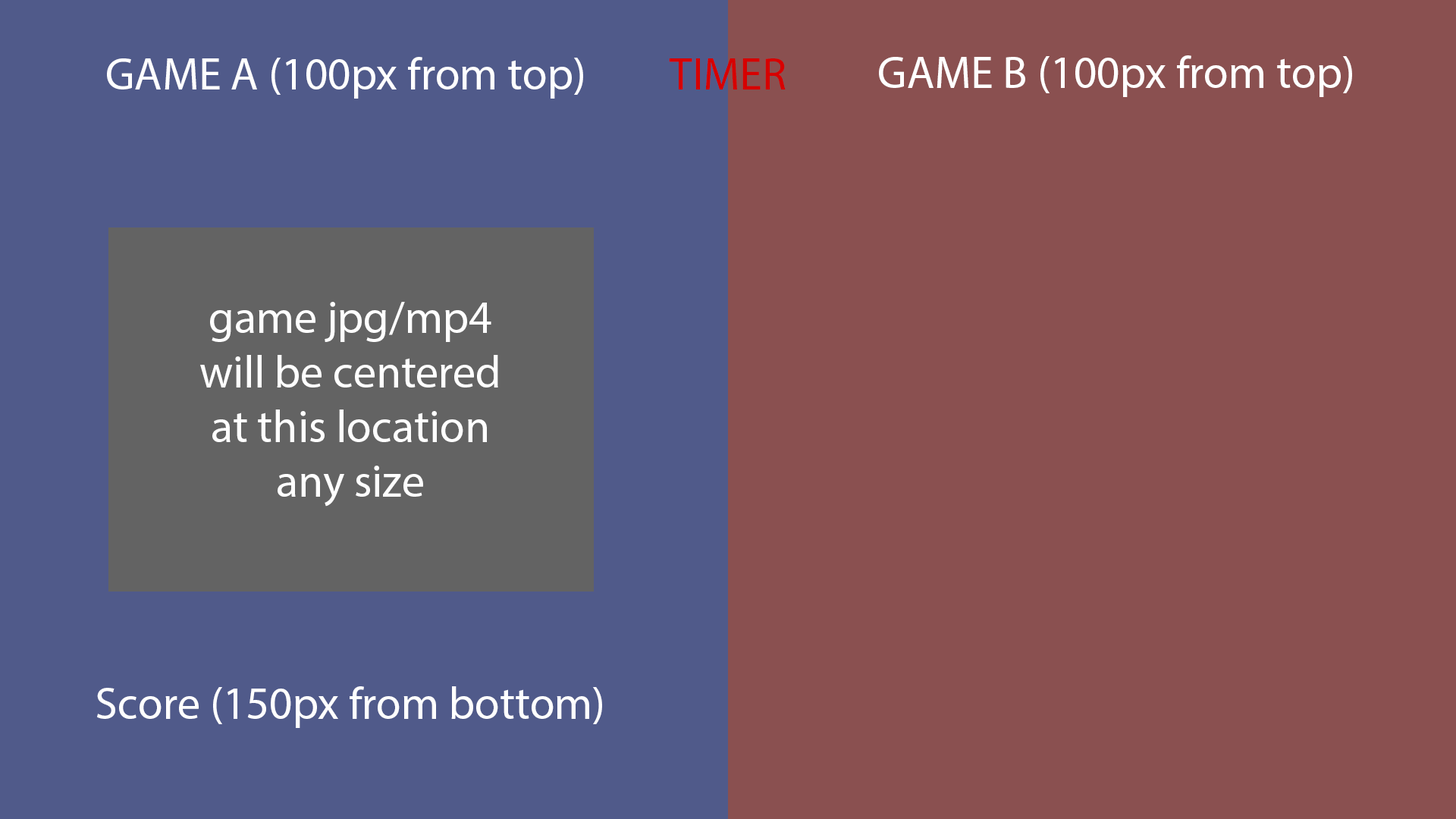
<style>
.page{position:relative;width:1456px;height:819px;background:#8a5050}
.page>*{position:absolute;margin:0}
.t1{font:45.5px "MyriadPro-Regular";color:#ffffff}
.t2{font:45.5px "MyriadPro-Regular";color:#d70000}
</style>
<div class="page">
<p class="t1" style="left:107px;top:57px;width:476px;height:42px">GAME A (100px from top)</p>
<p class="t2" style="left:669px;top:58px;width:117px;height:31px">TIMER</p>
<p class="t1" style="left:879px;top:55px;width:473px;height:42px">GAME B (100px from top)</p>
<p class="t1" style="left:200px;top:302px;width:298px;height:205px;text-align:center">game jpg/mp4<br>will be centered<br>at this location<br>any size</p>
<p class="t1" style="left:97px;top:686px;width:505px;height:42px">Score (150px from bottom)</p>
</div>
